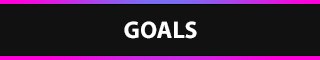
<style>
.page{position:relative;width:320px;height:60px;background:#111111}
.page>*{position:absolute;margin:0}
.t1{font:24px "MyriadPro-Bold";color:#ffffff}
</style>
<div class="page">
<p class="t1" style="left:124px;top:21px;width:73px;height:18px">GOALS</p>
</div>
